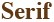
<style>
.page{position:relative;width:54px;height:22px;background:#ffffff}
.page>*{position:absolute;margin:0}
.t1{font:24px "Times-Bold";color:#603913}
</style>
<div class="page">
<p class="t1" style="left:1px;top:2px;width:51px;height:17px">Serif</p>
</div>
